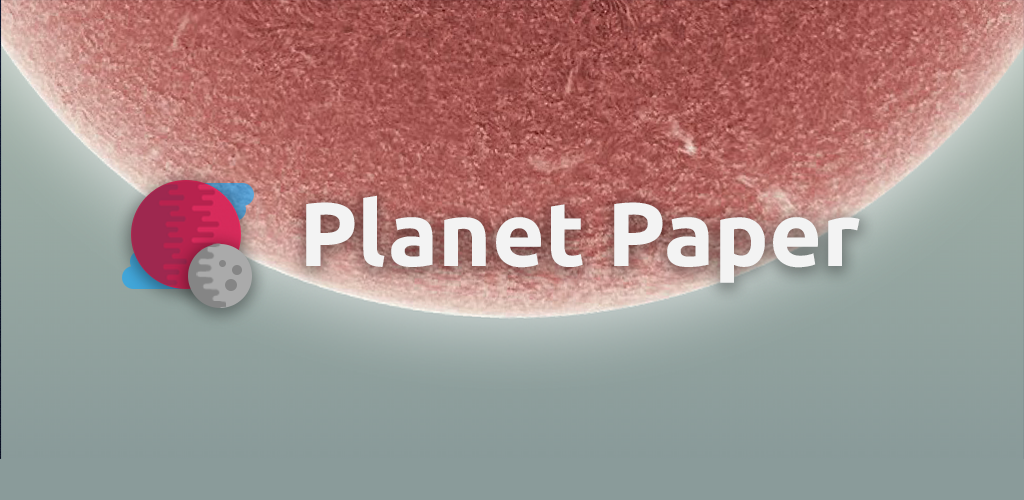
<style>
.page{position:relative;width:1024px;height:500px}
.page>*{position:absolute;margin:0}
.t1{font:90.6px "Ubuntu-Bold";color:#f3f3f3}
</style>
<div class="page">
<p class="t1" style="left:306px;top:195px;width:554px;height:88px">Planet Paper</p>
</div>
